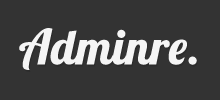
<style>
.page{position:relative;width:220px;height:100px;background:#333333}
.page>*{position:absolute;margin:0}
.t1{font:48px "Lobster1.4";letter-spacing:-0.02em;color:#ffffff;font-weight:bold}
</style>
<div class="page">
<p class="t1" style="left:19px;top:28px;width:178px;height:42px;opacity:0.95">Adminre.</p>
</div>
